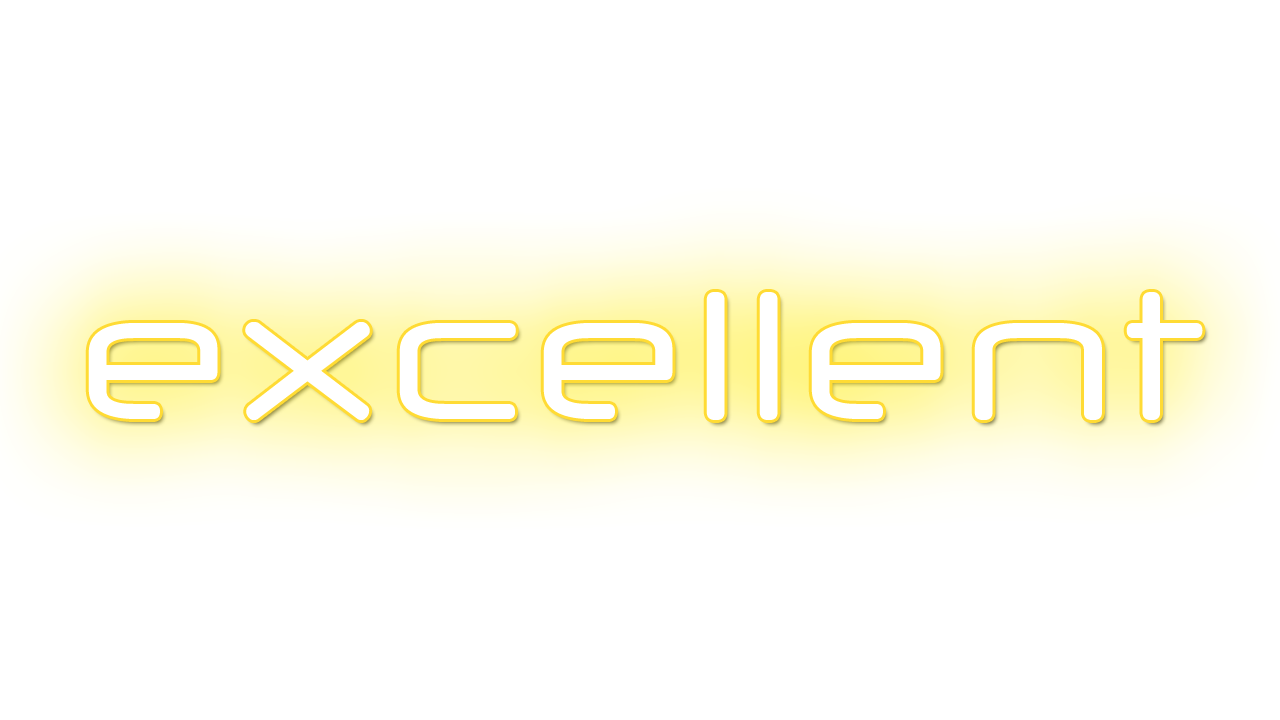
<style>
.page{position:relative;width:1280px;height:720px;background:#ffffff}
.page>*{position:absolute;margin:0}
.t1{font:180px "NeuropolXFree";color:#ffffff}
</style>
<div class="page">
<p class="t1" style="left:88px;top:292px;width:1115px;height:128px">excellent</p>
</div>
